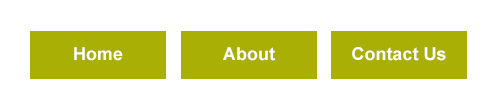
<style>
.page{position:relative;width:500px;height:110px;background:#ffffff}
.page>*{position:absolute;margin:0}
.t1{font:17.8px "Arial-BoldMT";color:#ffffff}
</style>
<div class="page">
<p class="t1" style="left:74px;top:47px;width:49px;height:14px">Home</p>
<p class="t1" style="left:223px;top:47px;width:52px;height:14px">About</p>
<p class="t1" style="left:352px;top:47px;width:94px;height:14px">Contact Us</p>
</div>
